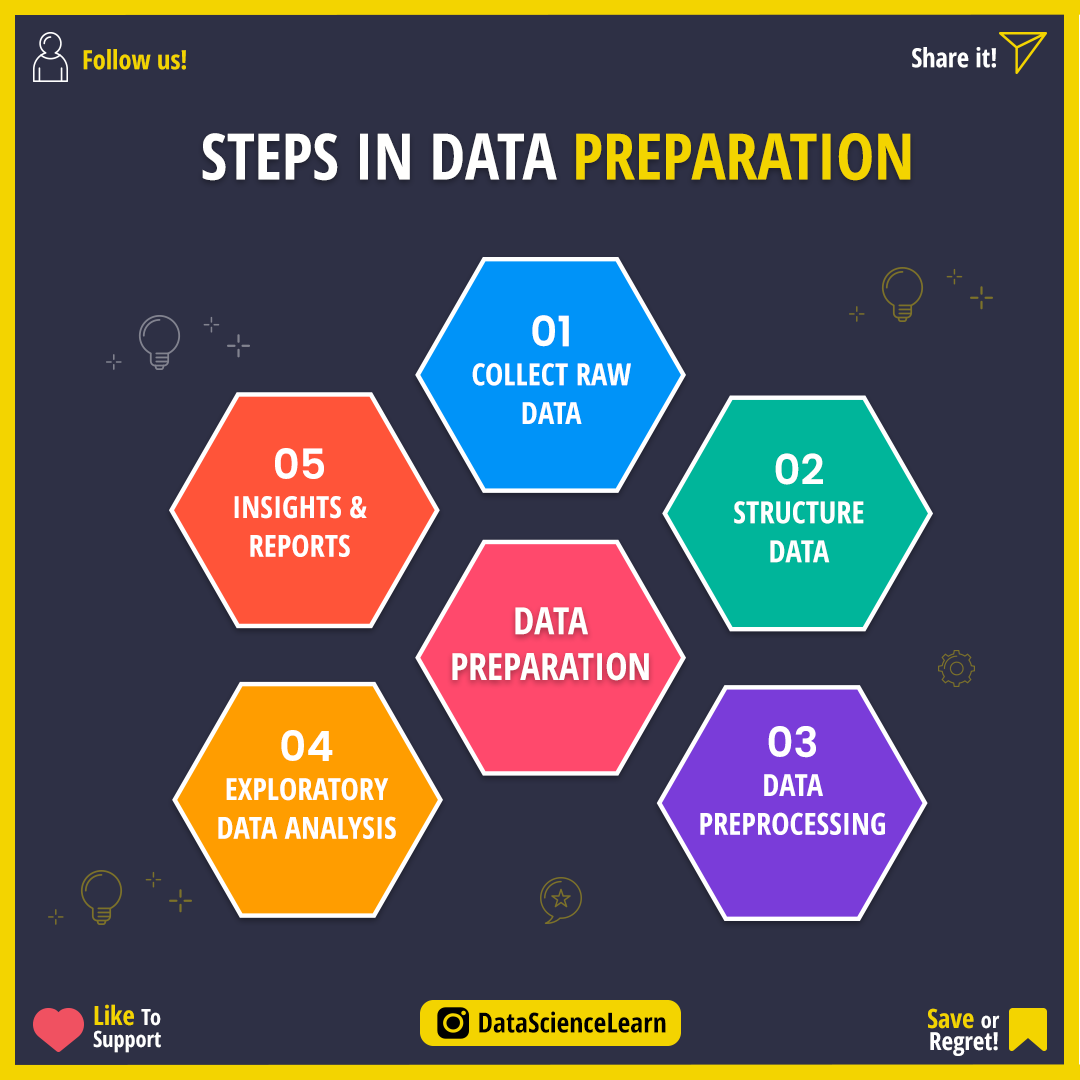
<style>
.page{position:relative;width:1080px;height:1080px;background:#2e3045}
.page>*{position:absolute;margin:0}
.t1{font:26.4px "OpenSans-CondensedBold";color:#f3d400}
.t2{font:26.4px "OpenSans-CondensedBold";color:#ffffff}
.t3{font:63.9px "OpenSans-CondensedBold";color:#fffffe}
.t4{font:63.9px "OpenSans-CondensedBold";color:#f3d400}
.t5{font:30.6px/38.9px "OpenSans-CondensedBold";color:#ffffff}
.t6{font:41.7px/33.3px "Poppins-SemiBold";color:#ffffff}
.t7{font:41.7px/50px "Poppins-SemiBold";color:#ffffff}
.t8{font:37.5px/45.8px "OpenSans-CondensedBold";color:#fffffe}
.t9{font:22.2px/22.2px "OpenSans-CondensedBold";color:#ffffff}
.t10{font:26.4px/22.2px "OpenSans-CondensedBold";color:#f3d400}
.t11{font:27.8px "OpenSans-CondensedBold";color:#000000}
.t12{font:25px/22.2px "OpenSans-CondensedBold";color:#ffffff}
</style>
<div class="page">
<p class="t1" style="left:83px;top:49px;width:103px;height:21px">Follow us!</p>
<p class="t2" style="left:912px;top:47px;width:84px;height:21px">Share it!</p>
<p class="t3" style="left:202px;top:133px;width:709px;height:48px">STEPS IN DATA <span class="t4">PREPARATION</span></p>
<p class="t5" style="left:472px;top:315px;width:159px;height:109px;text-align:center"><span class="t6">01<br></span>COLLECT RAW<br>DATA</p>
<p class="t5" style="left:234px;top:448px;width:133px;height:109px;text-align:center"><span class="t7">05<br></span>INSIGHTS &amp;<br>REPORTS</p>
<p class="t5" style="left:734px;top:453px;width:130px;height:110px;text-align:center"><span class="t6">02<br></span>STRUCTURE<br>DATA</p>
<p class="t8" style="left:452px;top:607px;width:197px;height:74px;text-align:center">DATA<br>PREPARATION</p>
<p class="t5" style="left:700px;top:726px;width:185px;height:109px;text-align:center"><span class="t6">03<br></span>DATA<br>PREPROCESSING</p>
<p class="t5" style="left:218px;top:730px;width:178px;height:109px;text-align:center"><span class="t6">04<br></span>EXPLORATORY<br>DATA ANALYSIS</p>
<p class="t9" style="left:93px;top:1004px;width:68px;height:49px"><span class="t10">Like </span>To<br>Support</p>
<p class="t11" style="left:479px;top:1011px;width:187px;height:22px">DataScienceLearn</p>
<p class="t12" style="left:928px;top:1008px;width:72px;height:48px;text-align:right"><span class="t10">Save </span><span class="t9">or<br></span>Regret!</p>
</div>
